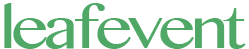
<style>
.page{position:relative;width:249px;height:49px;background:#ffffff}
.page>*{position:absolute;margin:0}
.t1{font:56.4px "BanglaMN";letter-spacing:-0.075em;color:#50a867;scale:1.17 1}
</style>
<div class="page">
<p class="t1" style="left:4px;top:3px;width:242px;height:46px">leafevent</p>
</div>
